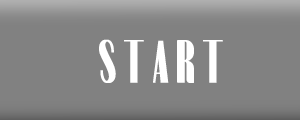
<style>
.page{position:relative;width:300px;height:120px;background:#818181}
.page>*{position:absolute;margin:0}
.t1{font:60px "PortiaRegular";letter-spacing:0.05em;color:#ffffff;text-transform:uppercase;font-weight:bold}
</style>
<div class="page">
<p class="t1" style="left:99px;top:39px;width:124px;height:44px">start</p>
</div>
